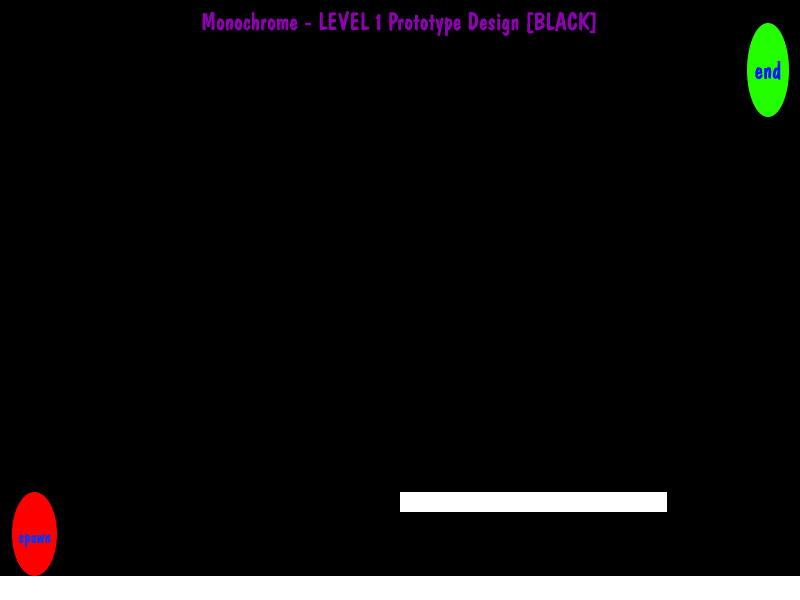
<style>
.page{position:relative;width:800px;height:600px;background:#000000}
.page>*{position:absolute;margin:0}
.t1{font:25px "DomCasualBT-Regular";color:#8f00b3}
</style>
<div class="page">
<p class="t1" style="left:202px;top:11px;width:394px;height:26px">Monochrome - LEVEL 1 Prototype Design [BLACK]</p>
</div>
